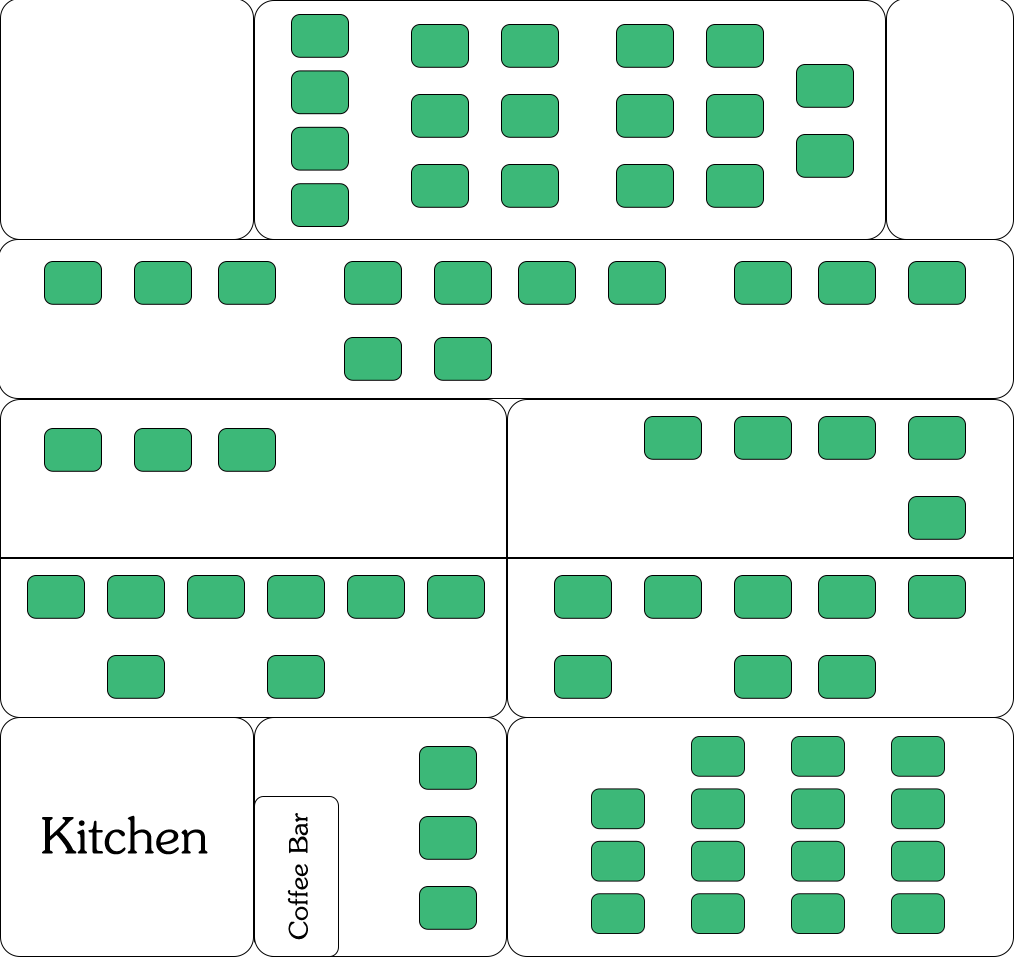
<style>
.page{position:relative;width:1014px;height:957px;background:#ffffff}
.page>*{position:absolute;margin:0}
.t1{font:80.1px "JasmineUPC";color:#000000}
.t2{font:40.5px "JasmineUPC";color:#000000;scale:1.06 1}
</style>
<div class="page">
<p class="t1" style="left:42px;top:815px;width:166px;height:40px">Kitchen</p>
<p class="t2" style="left:287px;top:813px;width:21px;height:127px;rotate:-90deg">Coffee Bar</p>
</div>
